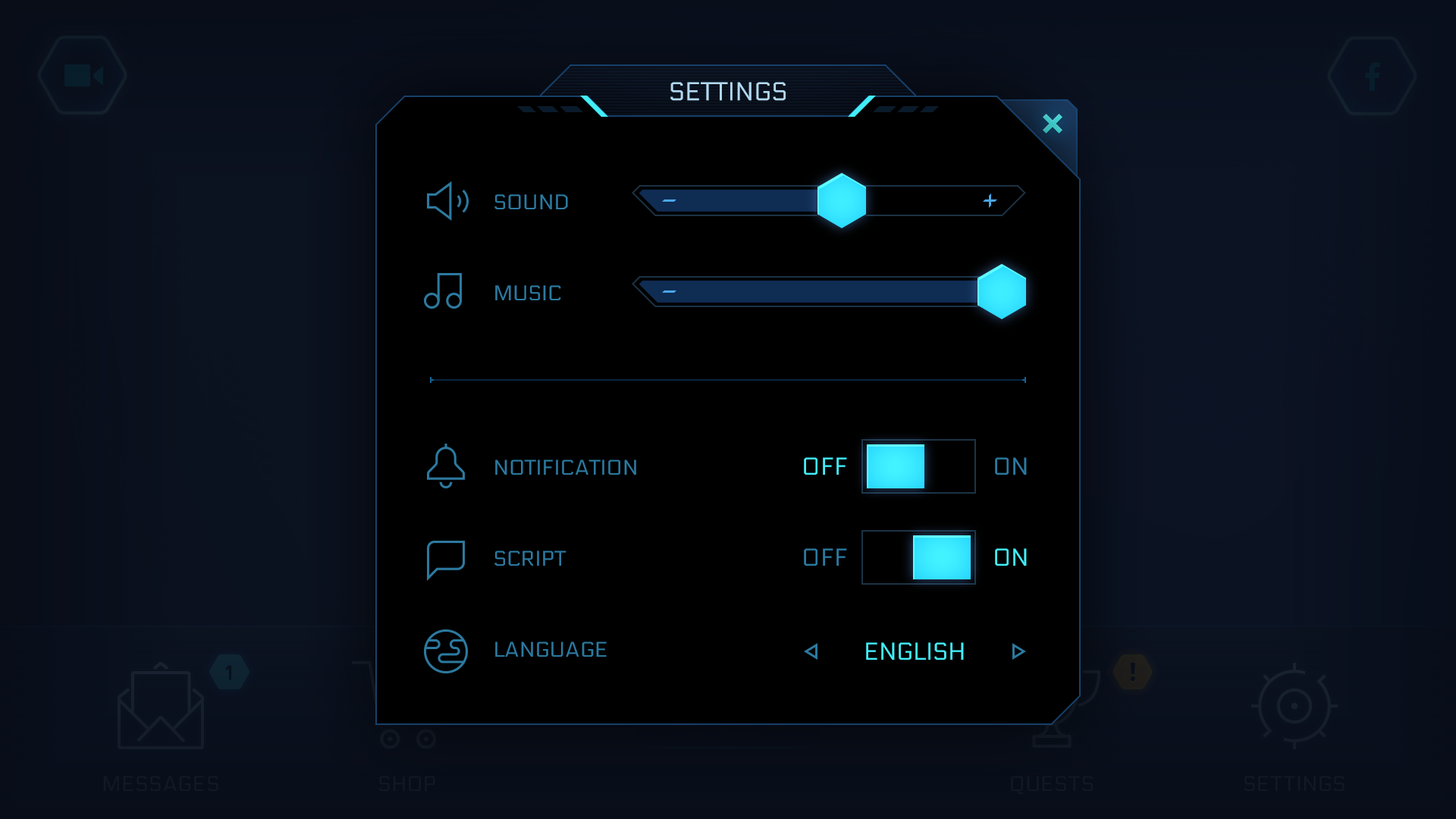
<style>
.page{position:relative;width:1456px;height:819px;background:#000000}
.page>*{position:absolute;margin:0}
.t1{font:25.8px "Electrolize-Regular";color:#b1d8f1;text-transform:uppercase}
.t2{font:21.2px/91px "Electrolize-Regular";color:#2c799f;text-transform:uppercase}
.t3{font:24.3px "Electrolize-Regular";color:#42edf8;text-transform:uppercase}
.t4{font:24.3px "Electrolize-Regular";color:#2c799f;text-transform:uppercase}
</style>
<div class="page">
<p class="t1" style="left:670px;top:82px;width:116px;height:19px">settings</p>
<p class="t2" style="left:494px;top:194px;width:74px;height:106px">Sound<br>Music</p>
<p class="t2" style="left:494px;top:460px;width:142px;height:197px">Notification<br>Script<br>Language</p>
<p class="t3" style="left:804px;top:457px;width:43px;height:18px">OFF</p>
<p class="t4" style="left:995px;top:457px;width:32px;height:18px">on</p>
<p class="t4" style="left:804px;top:548px;width:43px;height:18px">OFF</p>
<p class="t3" style="left:995px;top:548px;width:32px;height:18px">on</p>
<p class="t3" style="left:866px;top:642px;width:98px;height:18px">english</p>
</div>
